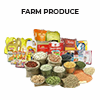
<style>
.page{position:relative;width:100px;height:100px;background:#fefefe}
.page>*{position:absolute;margin:0}
.t1{font:6.7px "Montserrat-Bold";color:#1e1c1d;text-transform:uppercase}
</style>
<div class="page">
<p class="t1" style="left:21px;top:9px;width:58px;height:5px">farm produce</p>
</div>
